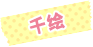
<style>
.page{position:relative;width:93px;height:47px;background:#ffffff}
.page>*{position:absolute;margin:0}
.t1{font:11.5px "shetumodengxiaofangti";color:#ef8299;font-weight:bold;scale:0.94 1}
</style>
<div class="page">
<p class="t1" style="left:29px;top:12px;width:36px;height:22px;rotate:-14deg">千绘</p>
</div>
